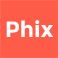
<style>
.page{position:relative;width:58px;height:58px;background:#ff5b49}
.page>*{position:absolute;margin:0}
.t1{font:22.2px "Montserrat-Bold";color:#ffffff}
</style>
<div class="page">
<p class="t1" style="left:6px;top:20px;width:48px;height:17px">Phix</p>
</div>
